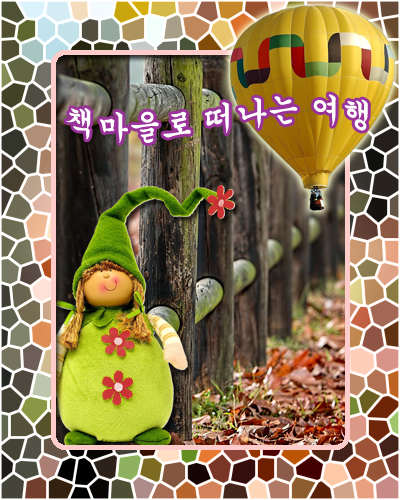
<style>
.page{position:relative;width:400px;height:500px}
.page>*{position:absolute;margin:0}
.t1{font:32px "Gungsuh";color:#ffffff}
</style>
<div class="page">
<p class="t1" style="left:66px;top:94px;width:302px;height:49px">책마을로 떠나는 여행</p>
</div>
